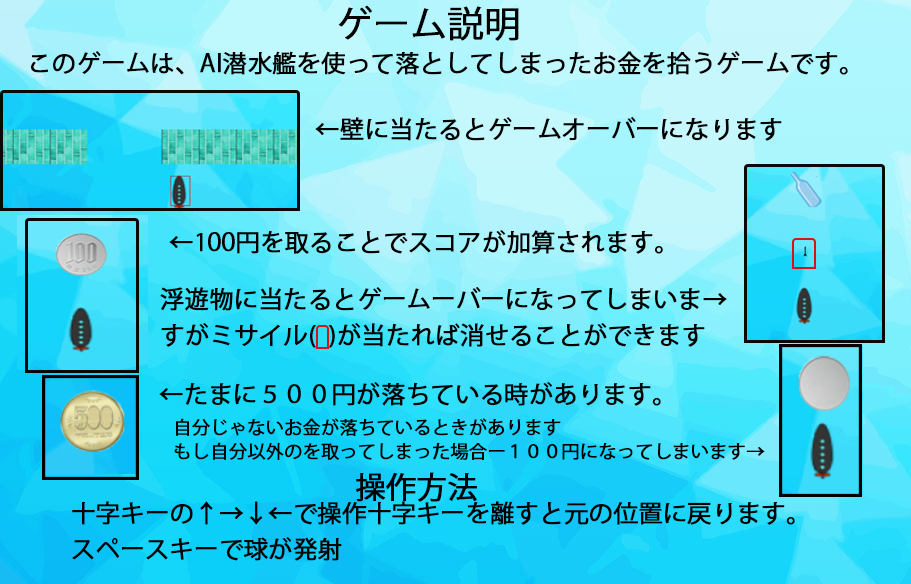
<style>
.page{position:relative;width:911px;height:584px}
.page>*{position:absolute;margin:0}
.t1{font:36px "KozGoPr6N-Regular";color:#000000;font-weight:bold}
.t2{font:24px "KozGoPr6N-Regular";color:#000000;font-weight:bold}
.t3{font:24px/36px "KozGoPr6N-Regular";color:#000000;font-weight:bold}
.t4{font:18px/24px "KozGoPr6N-Regular";color:#000000;font-weight:bold}
.t5{font:30px "KozGoPr6N-Regular";color:#000000;font-weight:bold}
</style>
<div class="page">
<p class="t1" style="left:338px;top:5px;width:181px;height:36px">ゲーム説明</p>
<p class="t2" style="left:31px;top:51px;width:817px;height:24px">このゲームは、AI潜水艦を使って落としてしまったお金を拾うゲームです。</p>
<p class="t2" style="left:315px;top:117px;width:467px;height:24px">←壁に当たるとゲームオーバーになります</p>
<p class="t2" style="left:169px;top:230px;width:494px;height:24px">←100円を取ることでスコアが加算されます。</p>
<p class="t3" style="left:160px;top:287px;width:567px;height:61px">浮遊物に当たるとゲームーバーになってしまいま→<br>すがミサイル(  )が当たれば消せることができます</p>
<p class="t2" style="left:159px;top:382px;width:502px;height:24px">←たまに５００円が落ちている時があります。</p>
<p class="t4" style="left:174px;top:418px;width:591px;height:42px">自分じゃないお金が落ちているときがあります<br>もし自分以外のを取ってしまった場合ー１００円になってしまいます→</p>
<p class="t5" style="left:356px;top:472px;width:121px;height:30px">操作方法</p>
<p class="t3" style="left:72px;top:501px;width:723px;height:60px">十字キーの↑→↓←で操作十字キーを離すと元の位置に戻ります。<br>スペースキーで球が発射</p>
</div>
